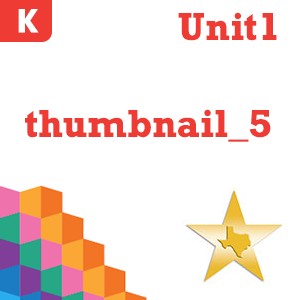
<style>
.page{position:relative;width:300px;height:300px;background:#ffffff}
.page>*{position:absolute;margin:0}
.t1{font:31.4px "BECAG-Bold";letter-spacing:0.02em;color:#ffffff;text-transform:uppercase}
.t2{font:36.2px "Rockwell-Bold";letter-spacing:0.02em;color:#ee3b33}
</style>
<div class="page">
<p class="t1" style="left:18px;top:9px;width:21px;height:24px">K</p>
<p class="t2" style="left:178px;top:12px;width:99px;height:29px">Unit1</p>
<p class="t1" style="left:272px;top:8px;width:11px;height:24px">1</p>
<p class="t2" style="left:25px;top:109px;width:246px;height:33px">thumbnail_5</p>
</div>
